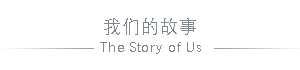
<style>
.page{position:relative;width:300px;height:70px;background:#ffffff}
.page>*{position:absolute;margin:0}
.t1{font:18px "DengXian-Regular";letter-spacing:0.05em;color:#80878f}
.t2{font:14px "DengXian-Regular";letter-spacing:0.05em;color:#80878f}
</style>
<div class="page">
<p class="t1" style="left:104px;top:18px;width:92px;height:17px">我们的故事</p>
<p class="t2" style="left:100px;top:42px;width:101px;height:12px">The Story of Us</p>
</div>
